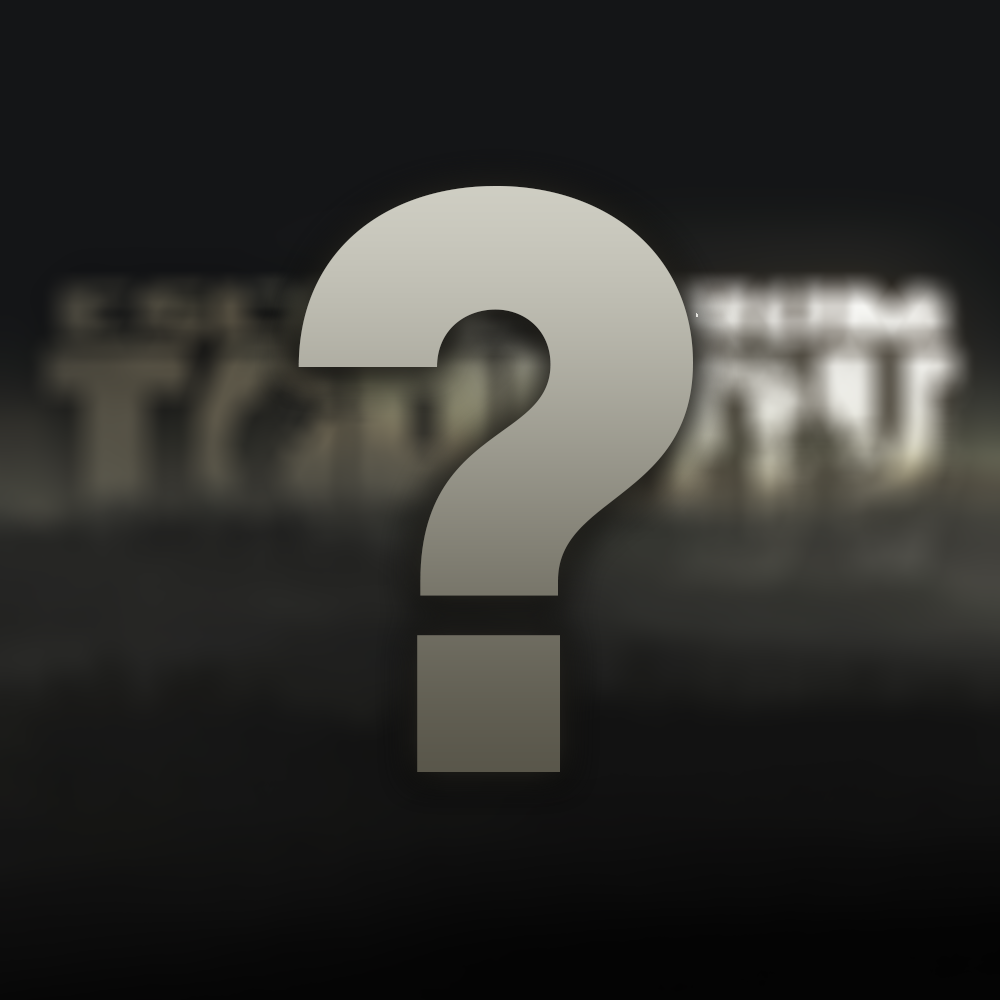
<style>
.page{position:relative;width:1000px;height:1000px;background:#141517}
.page>*{position:absolute;margin:0}
.t1{font:791.5px "Mont-HeavyDEMO"}
</style>
<div class="page">
<p class="t1" style="left:298px;top:186px;width:395px;height:586px">?</p>
</div>
